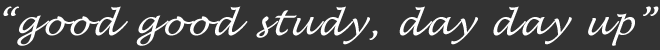
<style>
.page{position:relative;width:660px;height:50px;background:#333333}
.page>*{position:absolute;margin:0}
.t1{font:33.3px "LucidaHandwriting-Italic";letter-spacing:0.08em;color:#fefefe;font-style:italic}
</style>
<div class="page">
<p class="t1" style="left:3px;top:6px;width:656px;height:40px">“good good study, day day up”</p>
</div>
